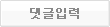
<style>
.page{position:relative;width:110px;height:27px;background:#f8f8f8}
.page>*{position:absolute;margin:0}
.t1{font:12px "Dotum";color:#888888;font-weight:bold}
</style>
<div class="page">
<p class="t1" style="left:30px;top:8px;width:49px;height:11px">댓글입력</p>
</div>
